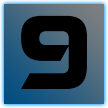
<style>
.page{position:relative;width:108px;height:108px;background:#000000}
.page>*{position:absolute;margin:0}
.t1{font:150px "ROBOTECHGP";color:#000000}
</style>
<div class="page">
<p class="t1" style="left:21px;top:15px;width:66px;height:74px">9</p>
</div>
